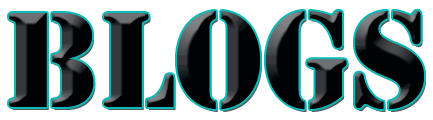
<style>
.page{position:relative;width:433px;height:120px;background:#ffffff}
.page>*{position:absolute;margin:0}
.t1{font:125.5px "StencilStd";color:#000306}
</style>
<div class="page">
<p class="t1" style="left:9px;top:11px;width:415px;height:98px">Blogs</p>
</div>
